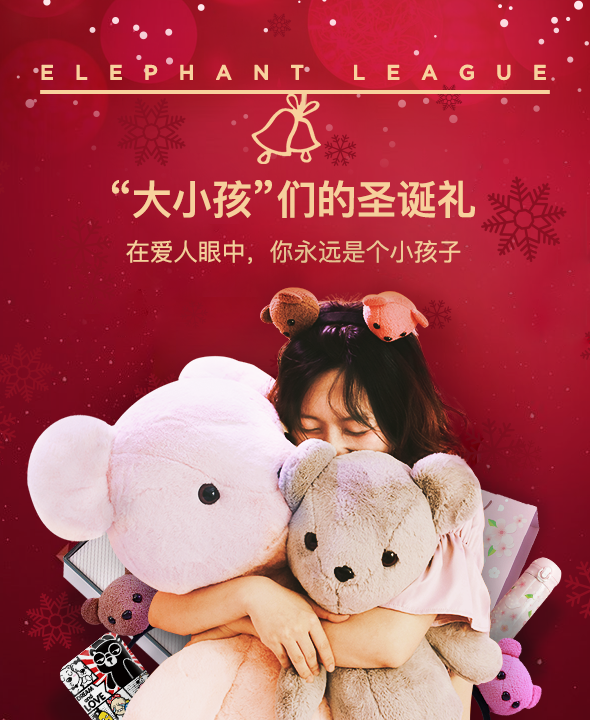
<style>
.page{position:relative;width:590px;height:720px}
.page>*{position:absolute;margin:0}
.t1{font:20.6px "GothamMedium";letter-spacing:1em;color:#f8d19d;text-transform:uppercase;font-weight:bold}
.t2{font:40.1px "PingFangSC-Semibold";color:#f6cf9c;text-transform:uppercase}
.t3{font:24px "PingFangSC-Regular";color:#f2cc99;text-transform:uppercase}
</style>
<div class="page">
<p class="t1" style="left:41px;top:64px;width:505px;height:17px">elephant league</p>
<p class="t2" style="left:111px;top:180px;width:364px;height:38px">“大小孩”们的圣诞礼</p>
<p class="t3" style="left:126px;top:240px;width:335px;height:24px">在爱人眼中，你永远是个小孩子</p>
</div>
